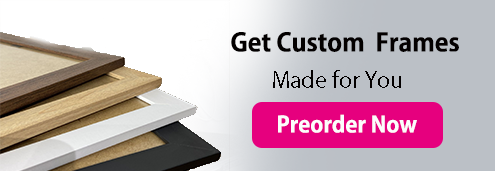
<style>
.page{position:relative;width:495px;height:171px;background:#bbc0c6}
.page>*{position:absolute;margin:0}
.t1{font:25px "KozGoPr6N-Bold";color:#030000}
.t2{font:22px "KozGoPr6N-Regular";color:#030000}
.t3{font:22px "KozGoPr6N-Bold";color:#fcfcfc}
</style>
<div class="page">
<p class="t1" style="left:231px;top:32px;width:228px;height:20px">Get Custom  Frames</p>
<p class="t2" style="left:273px;top:70px;width:128px;height:18px">Made for You</p>
<p class="t3" style="left:278px;top:114px;width:139px;height:19px">Preorder Now</p>
</div>
